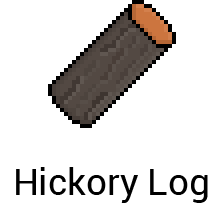
<style>
.page{position:relative;width:224px;height:203px;background:#ffffff}
.page>*{position:absolute;margin:0}
.t1{font:36.7px "Roboto-Regular";color:#000000}
</style>
<div class="page">
<p class="t1" style="left:16px;top:167px;width:192px;height:36px">Hickory Log</p>
</div>
